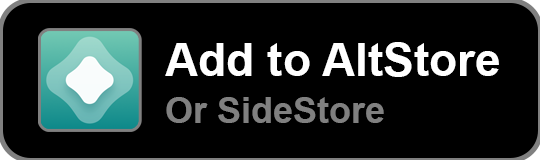
<style>
.page{position:relative;width:540px;height:160px;background:#000000}
.page>*{position:absolute;margin:0}
.t1{font:46px "Arial-BoldMT";color:#ffffff}
.t2{font:36px "Arial-BoldMT";color:#808080}
</style>
<div class="page">
<p class="t1" style="left:165px;top:42px;width:334px;height:35px">Add to AltStore</p>
<p class="t2" style="left:166px;top:97px;width:218px;height:26px">Or SideStore</p>
</div>
